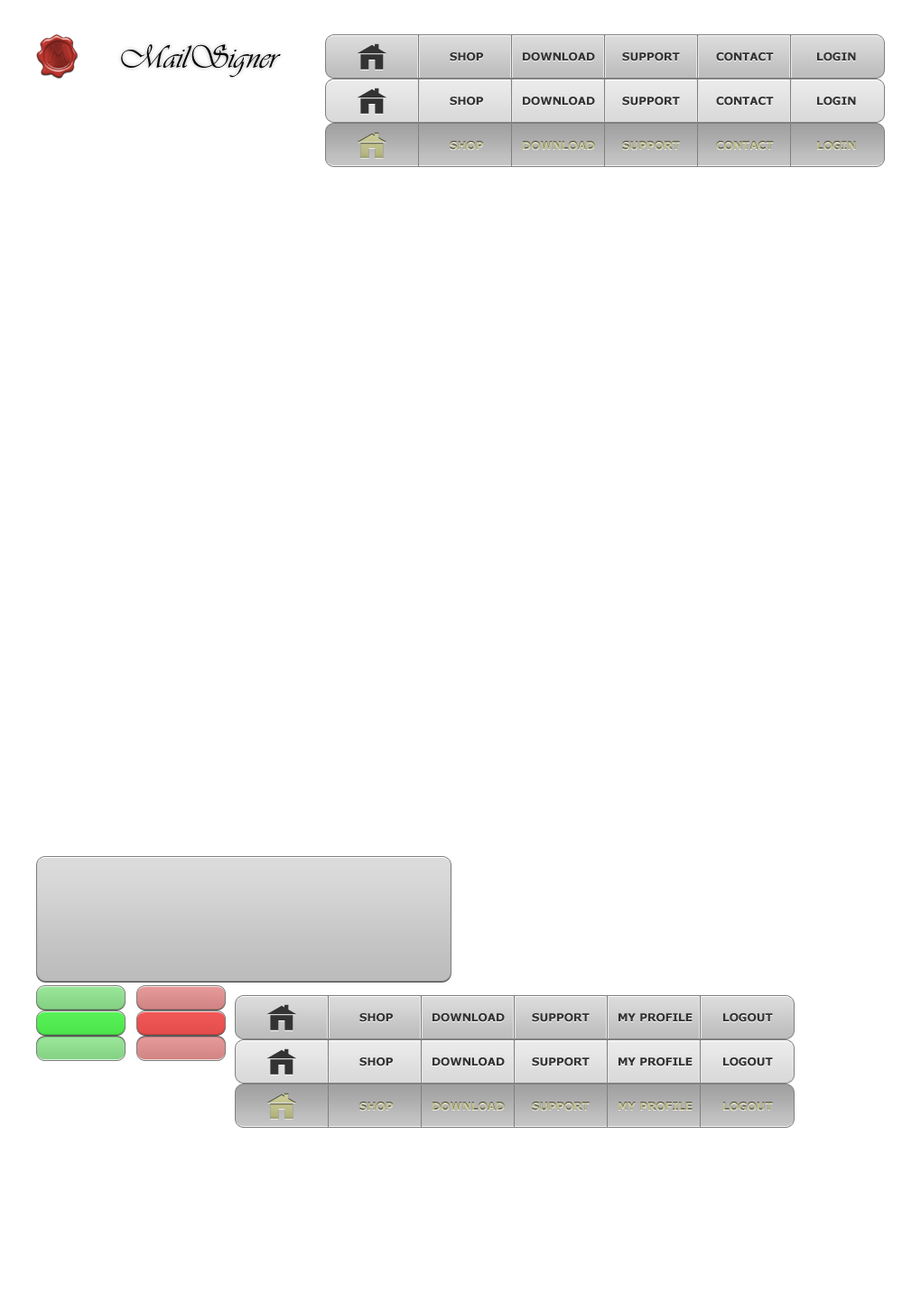
<style>
.page{position:relative;width:921px;height:1294px;background:#ffffff}
.page>*{position:absolute;margin:0}
.t1{font:33.4px "Vivaldii";color:#000000}
.t2{font:10.8px "Verdana-Bold";color:#333333}
.t3{font:10.8px "Verdana-Bold";color:#b7b784}
.t4{font:10.8px "Verdana-Bold";color:#b7b785}
</style>
<div class="page">
<p class="t1" style="left:121px;top:44px;width:160px;height:34px">MailSigner</p>
<p class="t2" style="left:450px;top:52px;width:33px;height:9px">SHOP</p>
<p class="t2" style="left:523px;top:52px;width:72px;height:9px">DOWNLOAD</p>
<p class="t2" style="left:622px;top:52px;width:58px;height:9px">SUPPORT</p>
<p class="t2" style="left:716px;top:52px;width:58px;height:9px">CONTACT</p>
<p class="t2" style="left:817px;top:52px;width:39px;height:9px">LOGIN</p>
<p class="t2" style="left:450px;top:97px;width:33px;height:9px">SHOP</p>
<p class="t2" style="left:523px;top:97px;width:72px;height:9px">DOWNLOAD</p>
<p class="t2" style="left:622px;top:97px;width:58px;height:9px">SUPPORT</p>
<p class="t2" style="left:716px;top:97px;width:58px;height:9px">CONTACT</p>
<p class="t2" style="left:817px;top:97px;width:39px;height:9px">LOGIN</p>
<p class="t3" style="left:450px;top:141px;width:33px;height:9px">SHOP</p>
<p class="t4" style="left:523px;top:141px;width:72px;height:9px">DOWNLOAD</p>
<p class="t3" style="left:622px;top:141px;width:58px;height:9px">SUPPORT</p>
<p class="t3" style="left:716px;top:141px;width:58px;height:9px">CONTACT</p>
<p class="t3" style="left:817px;top:141px;width:39px;height:9px">LOGIN</p>
<p class="t2" style="left:359px;top:1013px;width:34px;height:9px">SHOP</p>
<p class="t2" style="left:433px;top:1013px;width:72px;height:9px">DOWNLOAD</p>
<p class="t2" style="left:532px;top:1013px;width:58px;height:9px">SUPPORT</p>
<p class="t2" style="left:619px;top:1013px;width:74px;height:9px">MY PROFILE</p>
<p class="t2" style="left:723px;top:1013px;width:50px;height:9px">LOGOUT</p>
<p class="t2" style="left:359px;top:1058px;width:34px;height:9px">SHOP</p>
<p class="t2" style="left:433px;top:1058px;width:72px;height:9px">DOWNLOAD</p>
<p class="t2" style="left:532px;top:1058px;width:58px;height:9px">SUPPORT</p>
<p class="t2" style="left:619px;top:1058px;width:74px;height:9px">MY PROFILE</p>
<p class="t2" style="left:723px;top:1058px;width:50px;height:9px">LOGOUT</p>
<p class="t3" style="left:359px;top:1102px;width:34px;height:9px">SHOP</p>
<p class="t4" style="left:433px;top:1102px;width:72px;height:9px">DOWNLOAD</p>
<p class="t3" style="left:532px;top:1102px;width:58px;height:9px">SUPPORT</p>
<p class="t3" style="left:619px;top:1102px;width:74px;height:9px">MY PROFILE</p>
<p class="t3" style="left:723px;top:1102px;width:50px;height:9px">LOGOUT</p>
</div>
